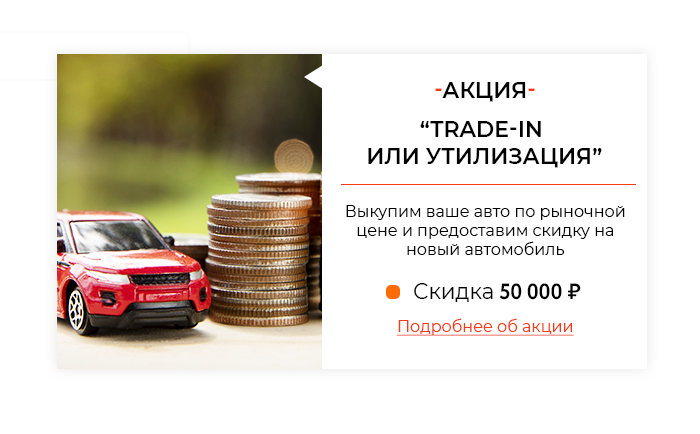
<style>
.page{position:relative;width:700px;height:434px;background:#ffffff}
.page>*{position:absolute;margin:0}
.t1{font:22px "Montserrat-SemiBold";color:#000000;text-transform:uppercase}
.t2{font:22px "Montserrat-SemiBold";color:#f73a18;text-transform:uppercase}
.t3{font:16px "Montserrat-Regular";color:#000000}
.t4{font:22px "Montserrat-Regular";color:#000000}
.t5{font:22px "Circe-Bold";color:#000000;text-transform:uppercase}
.t6{font:22px "Circe-Bold";color:#000000}
.t7{font:16px "Montserrat-Regular";color:#f73a18;text-decoration:underline}
</style>
<div class="page">
<p class="t1" style="left:435px;top:82px;width:100px;height:20px"><span class="t2">-</span>Акция<span class="t2">-</span></p>
<p class="t1" style="left:368px;top:121px;width:234px;height:47px;text-align:center">“TRADE-IN <br>ИЛИ утилизация”</p>
<p class="t3" style="left:346px;top:205px;width:279px;height:50px;text-align:center">Выкупим ваше авто по рыночной цене и предоставим скидку на новый автомобиль</p>
<p class="t4" style="left:414px;top:283px;width:167px;height:19px">Скидка <span class="t5">50 000 </span><span class="t6">₽</span></p>
<p class="t7" style="left:396px;top:318px;width:178px;height:18px">Подробнее об акции</p>
</div>
